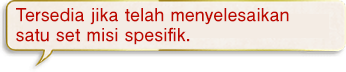
<style>
.page{position:relative;width:346px;height:72px;background:#f4ece4}
.page>*{position:absolute;margin:0}
.t1{font:18px/20px "FutoGoB101Pr5-Bold";color:#bd0800}
</style>
<div class="page">
<p class="t1" style="left:16px;top:8px;width:273px;height:37px">Tersedia jika telah menyelesaikan<br>satu set misi spesifik.</p>
</div>
